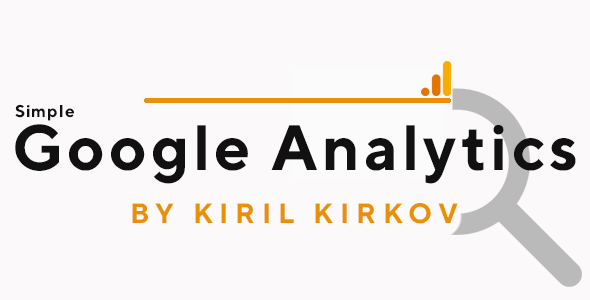
<style>
.page{position:relative;width:590px;height:300px;background:#fbf9fa}
.page>*{position:absolute;margin:0}
.t1{font:17px "TTNorms-Bold";letter-spacing:0.06em;color:#111111}
.t2{font:64px "TTNorms-Bold";letter-spacing:0.06em;color:#111111}
.t3{font:28px "TTNorms-Bold";letter-spacing:0.24em;color:#eb8f05}
</style>
<div class="page">
<p class="t1" style="left:15px;top:104px;width:59px;height:17px">Simple</p>
<p class="t2" style="left:15px;top:124px;width:561px;height:60px">Google Analytics</p>
<p class="t3" style="left:132px;top:203px;width:326px;height:21px">BY KIRIL KIRKOV</p>
</div>
